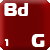
<style>
.page{position:relative;width:50px;height:50px}
.page>*{position:absolute;margin:0}
.t1{font:18px "ft40-Roman";color:#ffffff}
.t2{font:9px "ft40-Roman";color:#ffffff}
</style>
<div class="page">
<p class="t1" style="left:4px;top:3px;width:24px;height:13px">Bd</p>
<p class="t2" style="left:4px;top:39px;width:5px;height:7px">1</p>
<p class="t1" style="left:31px;top:34px;width:14px;height:13px">G</p>
</div>
